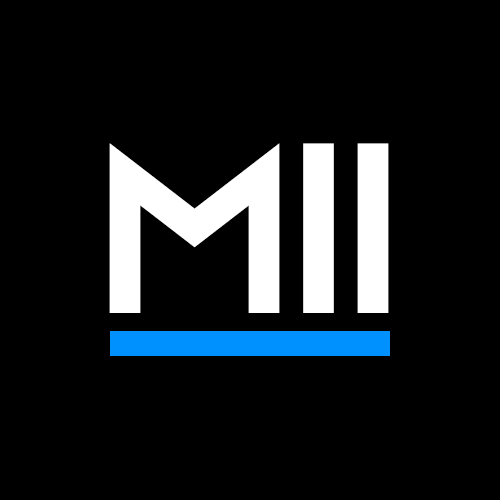
<style>
.page{position:relative;width:500px;height:500px;background:#000000}
.page>*{position:absolute;margin:0}
.t1{font:241.9px "AzonixRegular";color:#ffffff}
</style>
<div class="page">
<p class="t1" style="left:109px;top:143px;width:280px;height:170px">MII</p>
</div>
